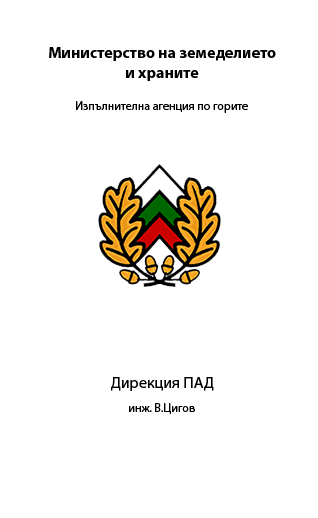
<style>
.page{position:relative;width:318px;height:518px;background:#ffffff}
.page>*{position:absolute;margin:0}
.t1{font:16px "MyriadPro-Bold";color:#000000}
.t2{font:12px "MyriadPro-Regular";color:#000000}
.t3{font:16px "MyriadPro-Regular";color:#000000}
</style>
<div class="page">
<p class="t1" style="left:49px;top:47px;width:227px;height:34px;text-align:center">Министерство на земеделието<br>и храните</p>
<p class="t2" style="left:76px;top:101px;width:172px;height:12px">Изпълнителна агенция по горите</p>
<p class="t3" style="left:111px;top:377px;width:103px;height:14px">Дирекция ПАД</p>
<p class="t2" style="left:129px;top:403px;width:66px;height:11px">инж. В.Цигов</p>
</div>
